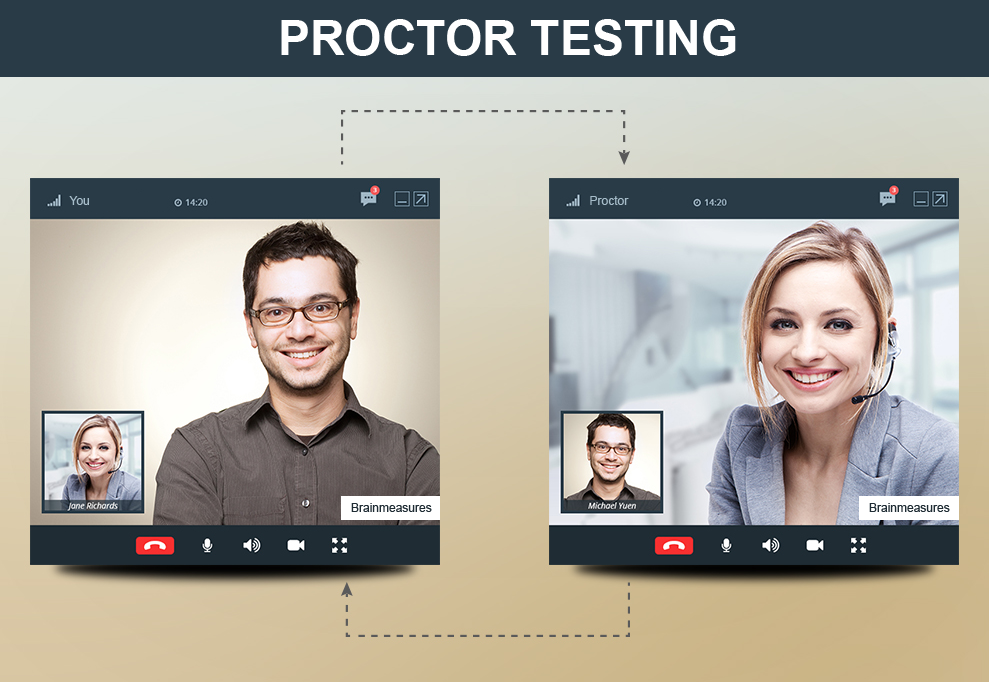
<style>
.page{position:relative;width:989px;height:682px}
.page>*{position:absolute;margin:0}
.t1{font:48px "Arial-BoldMT";color:#ffffff}
.t2{font:12px "ArialMT";color:#a7bdca}
.t3{font:12px "ArialMT";color:#1f2c34}
</style>
<div class="page">
<p class="t1" style="left:281px;top:19px;width:455px;height:37px">PROCTOR TESTING</p>
<p class="t2" style="left:69px;top:196px;width:20px;height:9px">You</p>
<p class="t2" style="left:590px;top:196px;width:39px;height:9px">Proctor</p>
<p class="t3" style="left:351px;top:503px;width:81px;height:9px">Brainmeasures</p>
<p class="t3" style="left:869px;top:503px;width:81px;height:9px">Brainmeasures</p>
</div>
